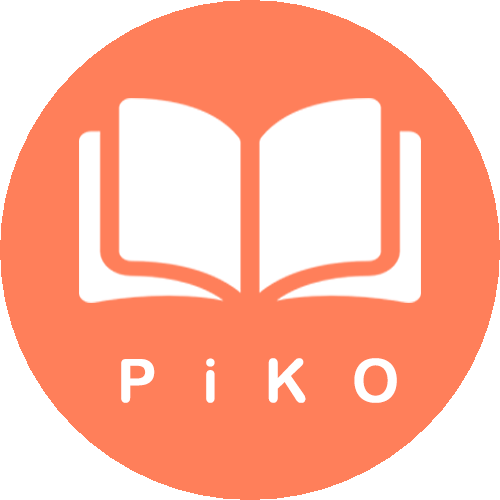
<style>
.page{position:relative;width:500px;height:500px;background:#ff7f5a}
.page>*{position:absolute;margin:0}
.t1{font:60px "ArialRoundedMTBold";letter-spacing:0.76em;color:#ffffff}
</style>
<div class="page">
<p class="t1" style="left:121px;top:358px;width:276px;height:45px">PiKO</p>
</div>
